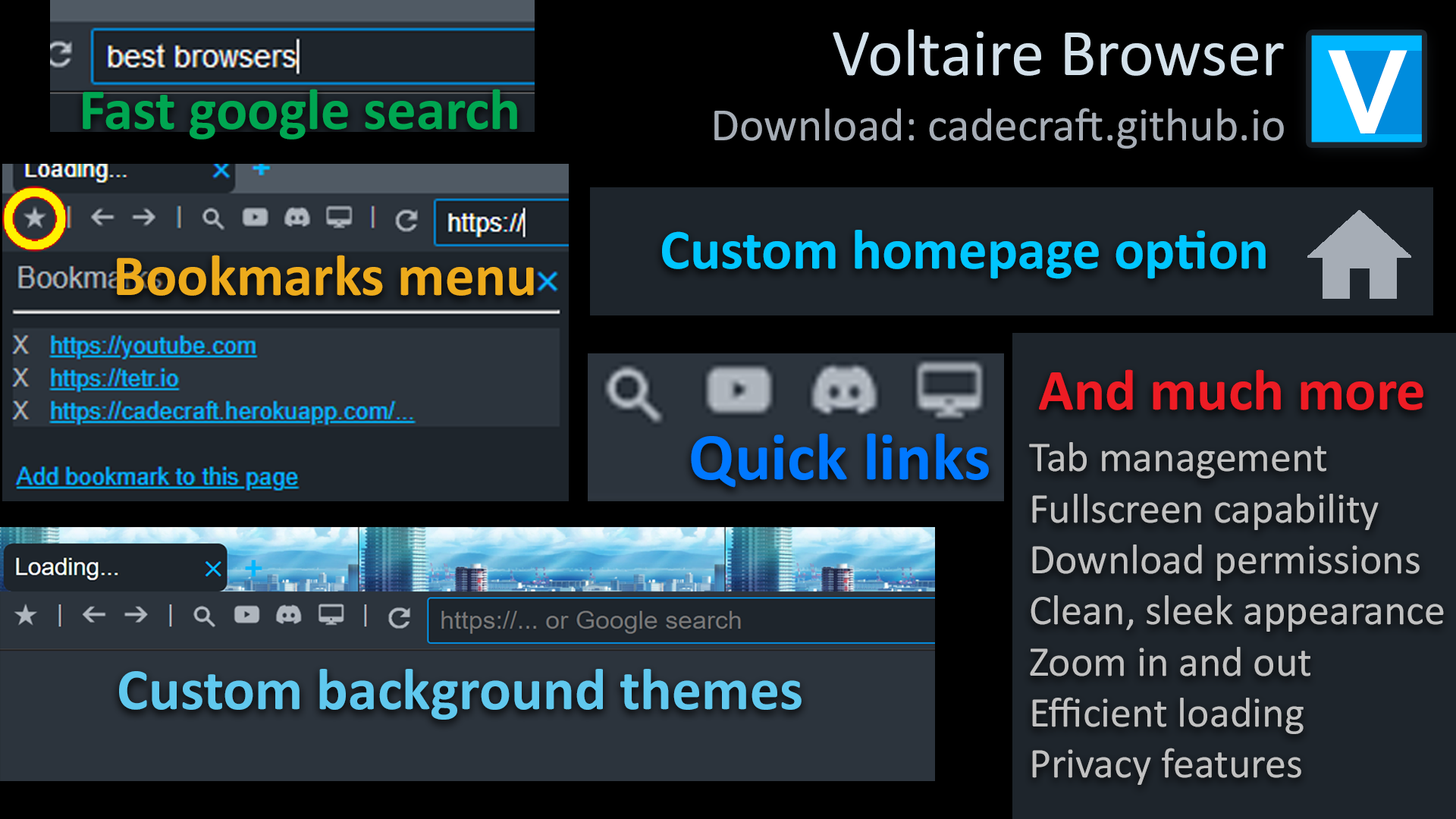
<style>
.page{position:relative;width:1456px;height:819px;background:#000000}
.page>*{position:absolute;margin:0}
.t1{font:67.4px "Calibri";color:#d3e1eb}
.t2{font:58.4px "Calibri-Bold";color:#00a651}
.t3{font:46.9px "Calibri";color:#a6adb6}
.t4{font:56.9px "Calibri-Bold";color:#00c6ff}
.t5{font:58.4px "Calibri-Bold";color:#edab1c}
.t6{font:58.4px "Calibri-Bold";color:#ed1c24}
.t7{font:67.3px "Calibri-Bold";color:#0078ff}
.t8{font:42.5px "Calibri";color:#c1c1c1}
.t9{font:59.2px "Calibri-Bold";color:#60c8ee}
</style>
<div class="page">
<p class="t1" style="left:833px;top:29px;width:451px;height:47px">Voltaire Browser</p>
<p class="t2" style="left:83px;top:89px;width:434px;height:51px">Fast google search</p>
<p class="t3" style="left:714px;top:108px;width:570px;height:41px">Download: cadecraft.github.io</p>
<p class="t4" style="left:662px;top:230px;width:604px;height:49px">Custom homepage option</p>
<p class="t5" style="left:117px;top:255px;width:417px;height:41px">Bookmarks menu</p>
<p class="t6" style="left:1039px;top:369px;width:384px;height:41px">And much more</p>
<p class="t7" style="left:691px;top:433px;width:298px;height:55px">Quick links</p>
<p class="t8" style="left:1029px;top:442px;width:415px;height:343px">Tab management<br>Fullscreen capability<br>Download permissions<br>Clean, sleek appearance<br>Zoom in and out<br>Efficient loading<br>Privacy features</p>
<p class="t9" style="left:119px;top:669px;width:683px;height:51px">Custom background themes</p>
</div>
